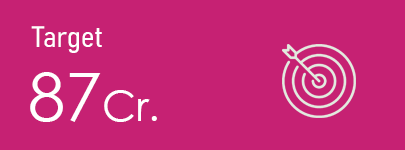
<style>
.page{position:relative;width:405px;height:150px;background:#c62173}
.page>*{position:absolute;margin:0}
.t1{font:29.2px "Bahnschrift-SemiLightSemiCondensed";color:#ffffff}
.t2{font:41.7px "CenturyGothic";color:#ffffff}
.t3{font:66.7px "CenturyGothic";color:#ffffff}
</style>
<div class="page">
<p class="t1" style="left:31px;top:26px;width:71px;height:27px">Target</p>
<p class="t2" style="left:30px;top:72px;width:127px;height:50px"><span class="t3">87</span>Cr.</p>
</div>
